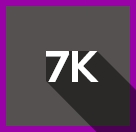
<style>
.page{position:relative;width:136px;height:132px;background:#545150}
.page>*{position:absolute;margin:0}
.t1{font:44px "NexaBold";color:#ffffff}
</style>
<div class="page">
<p class="t1" style="left:46px;top:51px;width:53px;height:31px">7K</p>
</div>
